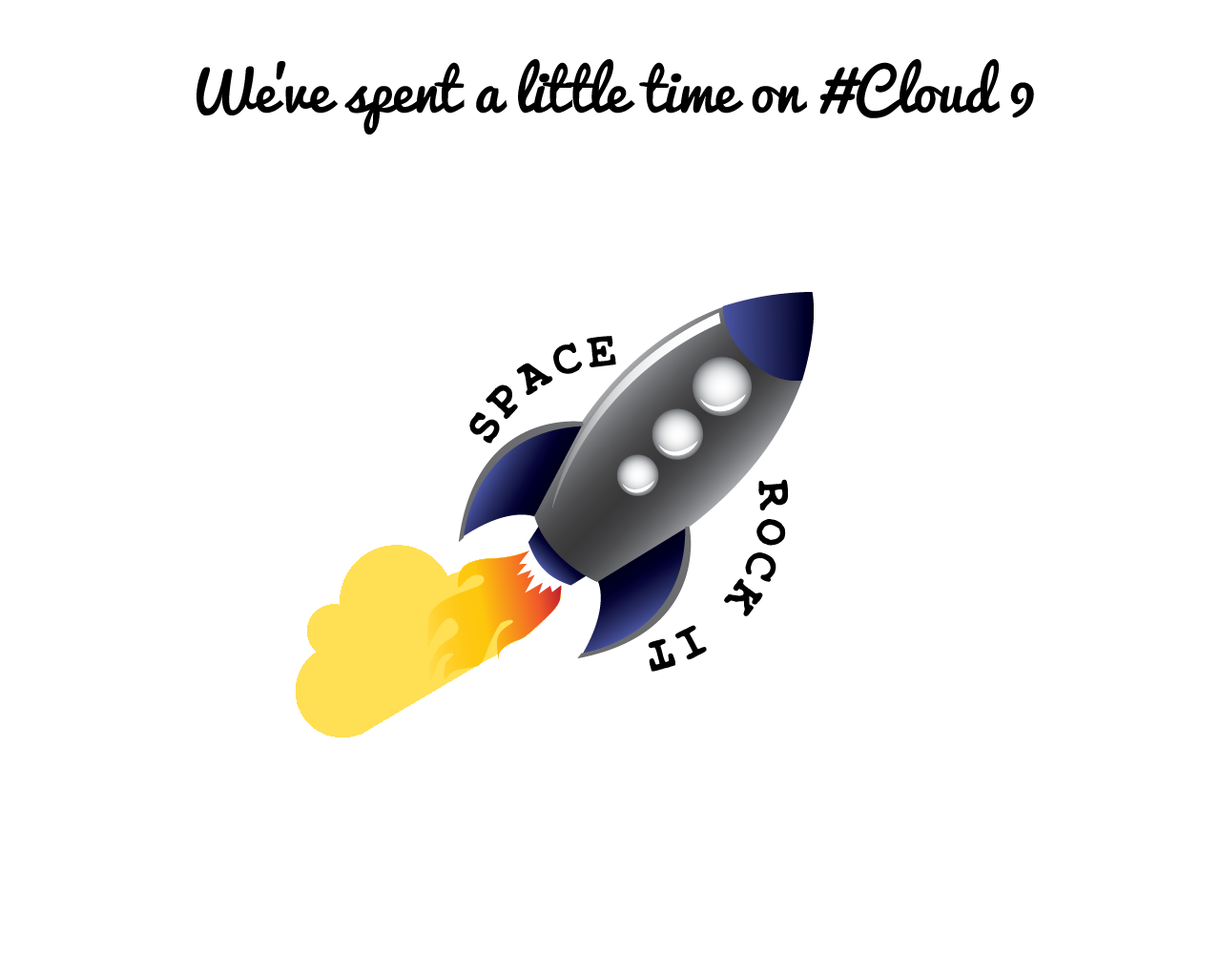
<style>
.page{position:relative;width:1221px;height:977px;background:#ffffff}
.page>*{position:absolute;margin:0}
.t1{font:57.2px "Pacifico-Regular";color:#000000}
</style>
<div class="page">
<p class="t1" style="left:196px;top:59px;width:838px;height:75px">We’ve spent a little time on #Cloud 9</p>
</div>
